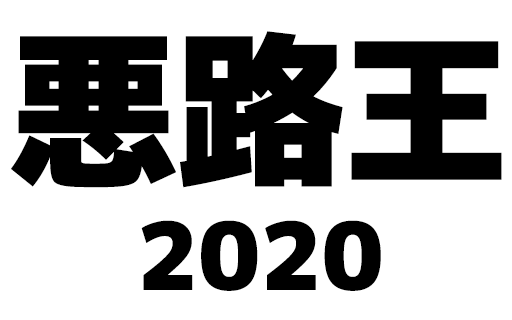
<style>
.page{position:relative;width:512px;height:320px;background:#ffffff}
.page>*{position:absolute;margin:0}
.t1{font:93.7px/182.1px "mplus-1p-black";color:#000000}
.t2{font:166.5px/182.1px "mplus-1p-black";color:#000000}
</style>
<div class="page">
<p class="t1" style="left:11px;top:31px;width:491px;height:260px;text-align:center"><span class="t2">悪路王<br></span>2020</p>
</div>
